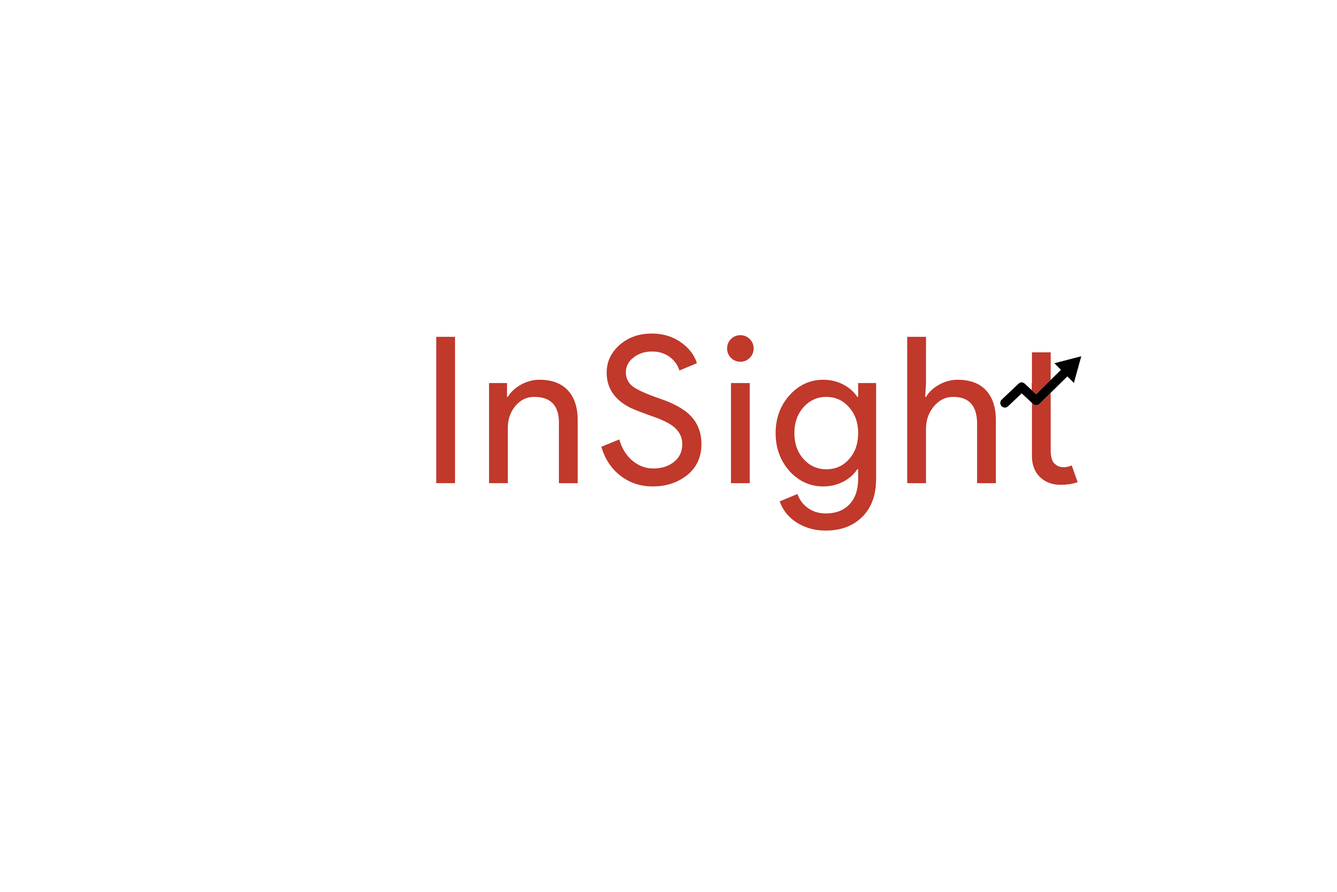
<style>
.page{position:relative;width:1337px;height:892px;background:#ffffff}
.page>*{position:absolute;margin:0}
.t1{font:204.3px "ProductSans-Regular";letter-spacing:0.04em;color:#c0392b}
</style>
<div class="page">
<p class="t1" style="left:436px;top:333px;width:642px;height:198px">InSight</p>
</div>
